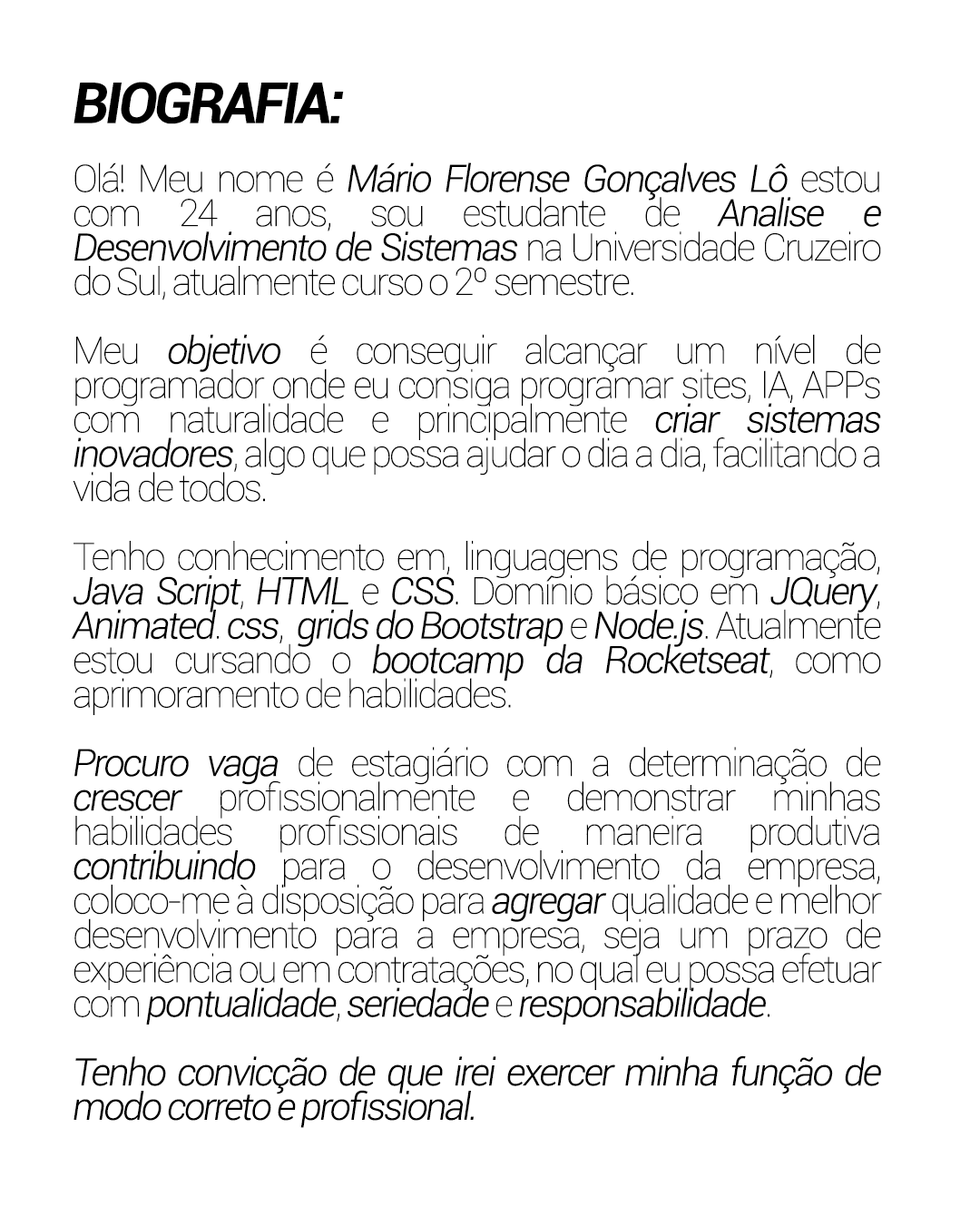
<style>
.page{position:relative;width:980px;height:1216px;background:#ffffff}
.page>*{position:absolute;margin:0}
.t1{font:37.8px/34.4px "Roboto-Thin";letter-spacing:-0.06em;color:#000000}
.t2{font:56.7px/34.4px "Roboto-BoldItalic";letter-spacing:-0.06em;color:#000000;text-transform:uppercase}
.t3{font:37.8px/34.4px "Roboto-LightItalic";letter-spacing:-0.06em;color:#000000}
</style>
<div class="page">
<p class="t1" style="left:72px;top:82px;width:810px;height:1046px;text-align:justify"><span class="t2">Biografia:<br></span><br>Olá! Meu nome é <span class="t3">Mário Florense Gonçalves Lô</span> estou com 24 anos, sou estudante de <span class="t3">Analise e Desenvolvimento de Sistemas</span> na Universidade Cruzeiro do Sul, atualmente curso o 2º semestre.<br><br>Meu <span class="t3">objetivo </span>é conseguir alcançar um nível de programador onde eu consiga programar sites, IA, APPs com naturalidade e principalmente <span class="t3">criar sistemas inovadores</span>, algo que possa ajudar o dia a dia, facilitando a vida de todos.<br><br>Tenho conhecimento em, linguagens de programação, <span class="t3">Java Script</span>, <span class="t3">HTML </span>e <span class="t3">CSS</span>. Domínio básico em <span class="t3">JQuery</span>, <span class="t3">Animated</span>. <span class="t3">css</span>,  <span class="t3">grids do Bootstrap </span>e <span class="t3">Node.js</span>. Atualmente estou cursando o <span class="t3">bootcamp da Rocketseat</span>, como aprimoramento de habilidades. <br><br><span class="t3">Procuro vaga </span>de estagiário com a determinação de <span class="t3">crescer </span>profissionalmente e demonstrar minhas habilidades profissionais de maneira produtiva <span class="t3">contribuindo </span>para o desenvolvimento da empresa, coloco-me à disposição para <span class="t3">agregar </span>qualidade e melhor desenvolvimento para a empresa, seja um prazo de experiência ou em contratações, no qual eu possa efetuar com <span class="t3">pontualidade</span>, <span class="t3">seriedade </span>e <span class="t3">responsabilidade</span>.     <br><br><span class="t3">Tenho convicção de que irei exercer minha função de modo correto e profissional.</span></p>
</div>
